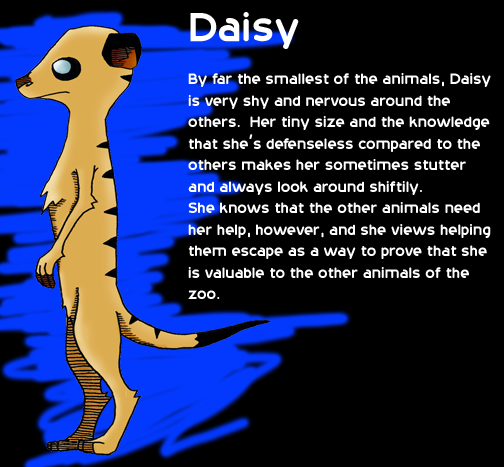
<style>
.page{position:relative;width:504px;height:467px;background:#000000}
.page>*{position:absolute;margin:0}
.t1{font:17.9px "20thCenturyFont";color:#ffffff}
.t2{font:47.8px "20thCenturyFont";color:#ffffff}
</style>
<div class="page">
<p class="t1" style="left:188px;top:12px;width:303px;height:287px"><span class="t2">Daisy<br></span><br>By far the smallest of the animals, Daisy <br>is very shy and nervous around the <br>others.  Her tiny size and the knowledge<br>that she’s defenseless compared to the <br>others makes her sometimes stutter <br>and always look around shiftily.  <br>She knows that the other animals need <br>her help, however, and she views helping <br>them escape as a way to prove that she<br>is valuable to the other animals of the <br>zoo.</p>
</div>
